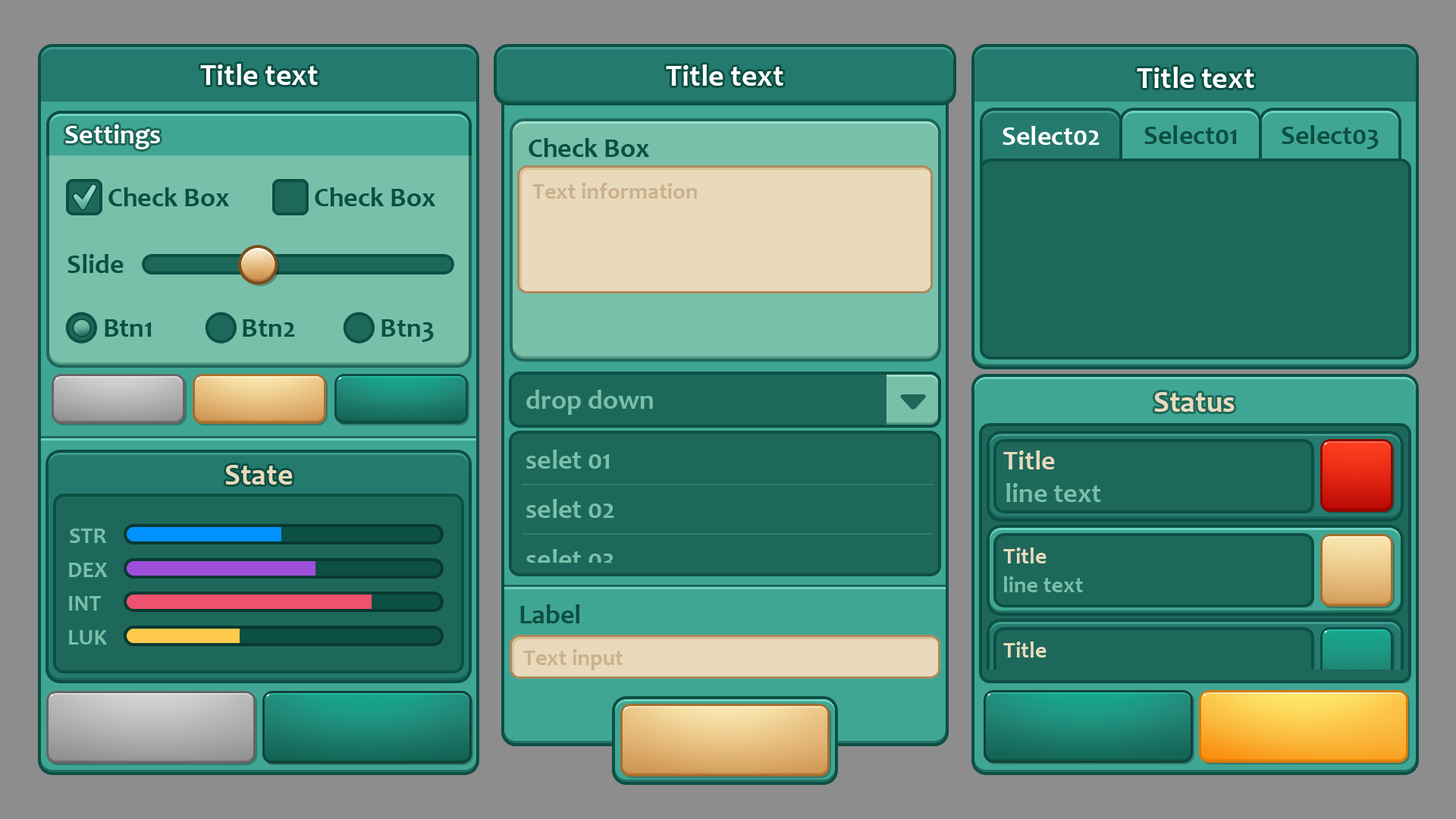
<style>
.page{position:relative;width:1456px;height:819px;background:#1e685b}
.page>*{position:absolute;margin:0}
.t1{font:30.3px "Candara-Bold";color:#ffffff}
.t2{font:27.3px "Candara-Bold";color:#ffffff}
.t3{font:27.3px "Candara-Bold";color:#0c4f43}
.t4{font:22.7px "Candara-Bold";color:#cab18d}
.t5{font:27.3px "Candara-Bold";color:#78c0aa}
.t6{font:30.3px "Candara-Bold";color:#e8dabb}
.t7{font:27.3px "Candara-Bold";color:#e8dabb}
.t8{font:22.7px "Candara-Bold";color:#78c0aa}
.t9{font:22.7px "Candara-Bold";color:#e8dabb}
</style>
<div class="page">
<p class="t1" style="left:200px;top:64px;width:118px;height:21px">Title text</p>
<p class="t1" style="left:666px;top:64px;width:117px;height:22px">Title text</p>
<p class="t1" style="left:1137px;top:67px;width:117px;height:21px">Title text</p>
<p class="t2" style="left:65px;top:124px;width:95px;height:25px">Settings</p>
<p class="t2" style="left:1003px;top:126px;width:97px;height:19px">Select02</p>
<p class="t3" style="left:1144px;top:125px;width:93px;height:19px">Select01</p>
<p class="t3" style="left:1282px;top:125px;width:97px;height:24px">Select03</p>
<p class="t3" style="left:529px;top:138px;width:120px;height:19px">Check Box</p>
<p class="t4" style="left:532px;top:183px;width:165px;height:16px">Text information</p>
<p class="t3" style="left:108px;top:187px;width:121px;height:19px">Check Box</p>
<p class="t3" style="left:315px;top:187px;width:120px;height:19px">Check Box</p>
<p class="t3" style="left:67px;top:254px;width:57px;height:19px">Slide</p>
<p class="t3" style="left:105px;top:319px;width:47px;height:18px">Btn1</p>
<p class="t3" style="left:243px;top:319px;width:52px;height:18px">Btn2</p>
<p class="t3" style="left:381px;top:319px;width:53px;height:23px">Btn3</p>
<p class="t5" style="left:526px;top:390px;width:127px;height:25px">drop down</p>
<p class="t6" style="left:1154px;top:392px;width:81px;height:20px">Status</p>
<p class="t5" style="left:526px;top:450px;width:84px;height:19px">selet 01</p>
<p class="t7" style="left:1003px;top:450px;width:52px;height:19px">Title</p>
<p class="t6" style="left:225px;top:465px;width:68px;height:20px">State</p>
<p class="t5" style="left:1006px;top:483px;width:95px;height:19px">line text</p>
<p class="t5" style="left:526px;top:499px;width:88px;height:19px">selet 02</p>
<p class="t8" style="left:70px;top:529px;width:36px;height:14px">STR</p>
<p class="t5" style="left:526px;top:549px;width:88px;height:24px">selet 03</p>
<p class="t9" style="left:1003px;top:548px;width:43px;height:15px">Title</p>
<p class="t8" style="left:69px;top:563px;width:39px;height:14px">DEX</p>
<p class="t8" style="left:1003px;top:576px;width:80px;height:16px">line text</p>
<p class="t8" style="left:69px;top:596px;width:32px;height:14px">INT</p>
<p class="t3" style="left:520px;top:604px;width:60px;height:19px">Label</p>
<p class="t8" style="left:69px;top:630px;width:38px;height:15px">LUK</p>
<p class="t4" style="left:523px;top:649px;width:100px;height:21px">Text input</p>
</div>
